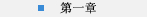
<style>
.page{position:relative;width:147px;height:17px;background:#f1f1f1}
.page>*{position:absolute;margin:0}
.t1{font:12px "SimSun";color:#000000;font-weight:bold}
</style>
<div class="page">
<p class="t1" style="left:40px;top:0px;width:77px;height:17px">第一章</p>
</div>
